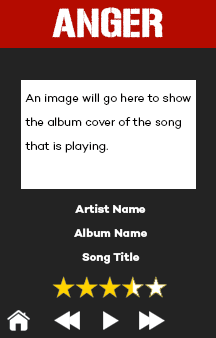
<style>
.page{position:relative;width:216px;height:338px;background:#232323}
.page>*{position:absolute;margin:0}
.t1{font:68px "UrbanSketch";color:#ffffff}
.t2{font:20px "Campton-LightDEMO";color:#010000}
.t3{font:20px "Campton-BoldDEMO";color:#ffffff}
</style>
<div class="page">
<p class="t1" style="left:52px;top:7px;width:111px;height:31px">ANGER</p>
<p class="t2" style="left:25px;top:93px;width:166px;height:60px">An image will go here to show the album cover of the song that is playing.</p>
<p class="t3" style="left:74px;top:204px;width:73px;height:60px;text-align:center">Artist Name<br>Album Name<br>Song Title</p>
</div>
